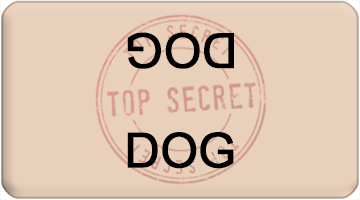
<style>
.page{position:relative;width:360px;height:200px;background:#e8d0bb}
.page>*{position:absolute;margin:0}
.t1{font:48px "ArialMT";color:#000000;font-weight:bold}
</style>
<div class="page">
<p class="t1" style="left:127px;top:32px;width:107px;height:37px;rotate:180deg">DOG</p>
<p class="t1" style="left:127px;top:132px;width:107px;height:37px">DOG</p>
</div>
